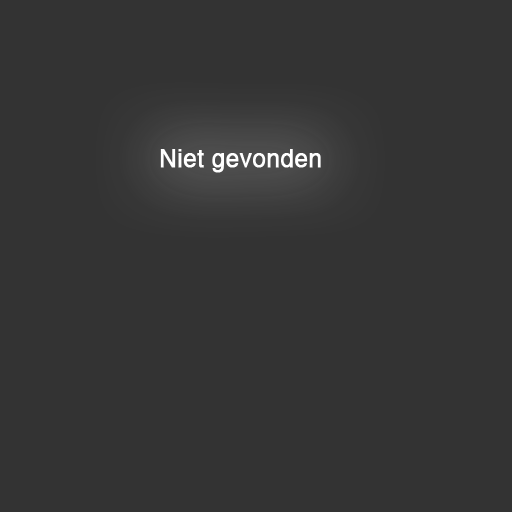
<style>
.page{position:relative;width:512px;height:512px;background:#333333}
.page>*{position:absolute;margin:0}
.t1{font:24px "Helvetica";color:#ffffff;font-weight:bold}
</style>
<div class="page">
<p class="t1" style="left:160px;top:149px;width:161px;height:24px">Niet gevonden</p>
</div>
